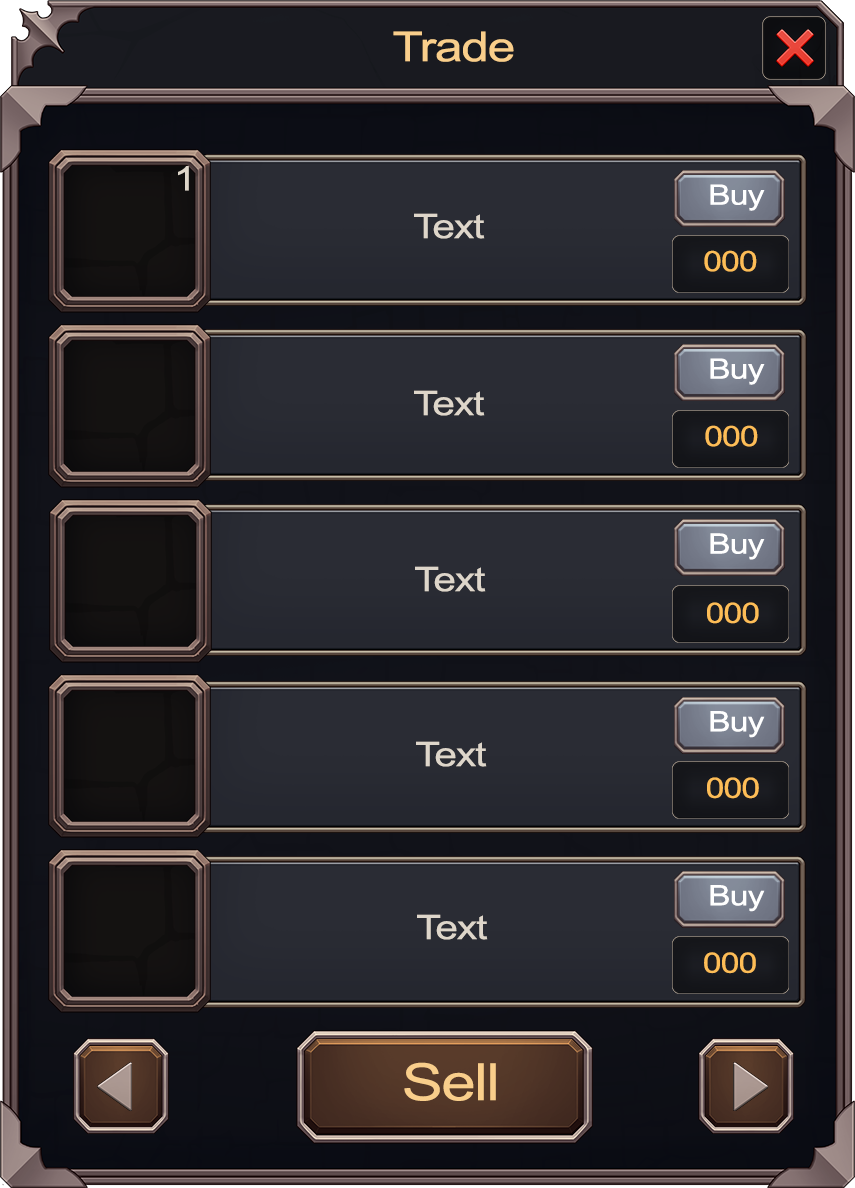
<style>
.page{position:relative;width:855px;height:1188px}
.page>*{position:absolute;margin:0}
.t1{font:41.4px "ArialMT";letter-spacing:-0.025em;color:#f9ce8b;scale:1.2 1}
.t2{font:33.7px "ArialMT";letter-spacing:-0.025em;color:#ded6ca;scale:1.2 1}
.t3{font:28.1px "ArialMT";letter-spacing:-0.025em;color:#ffffff;scale:1.2 1}
.t4{font:28.1px "ArialMT";letter-spacing:-0.025em;color:#fdbd57;scale:1.2 1}
.t5{font:51.4px "ArialMT";letter-spacing:-0.025em;color:#f9ce8b;scale:1.2 1}
</style>
<div class="page">
<p class="t1" style="left:393px;top:31px;width:121px;height:31px">Trade</p>
<p class="t2" style="left:178px;top:166px;width:11px;height:25px">1</p>
<p class="t3" style="left:710px;top:184px;width:55px;height:27px">Buy</p>
<p class="t2" style="left:414px;top:213px;width:71px;height:26px">Text</p>
<p class="t4" style="left:704px;top:250px;width:53px;height:22px">000</p>
<p class="t3" style="left:710px;top:358px;width:55px;height:27px">Buy</p>
<p class="t2" style="left:414px;top:390px;width:71px;height:26px">Text</p>
<p class="t4" style="left:705px;top:425px;width:53px;height:22px">000</p>
<p class="t3" style="left:710px;top:533px;width:55px;height:27px">Buy</p>
<p class="t2" style="left:415px;top:566px;width:71px;height:26px">Text</p>
<p class="t4" style="left:707px;top:602px;width:52px;height:22px">000</p>
<p class="t3" style="left:710px;top:711px;width:55px;height:27px">Buy</p>
<p class="t2" style="left:416px;top:741px;width:71px;height:26px">Text</p>
<p class="t4" style="left:707px;top:777px;width:52px;height:22px">000</p>
<p class="t3" style="left:710px;top:885px;width:55px;height:27px">Buy</p>
<p class="t2" style="left:417px;top:914px;width:71px;height:26px">Text</p>
<p class="t4" style="left:704px;top:952px;width:52px;height:22px">000</p>
<p class="t5" style="left:404px;top:1062px;width:92px;height:39px">Sell</p>
</div>
